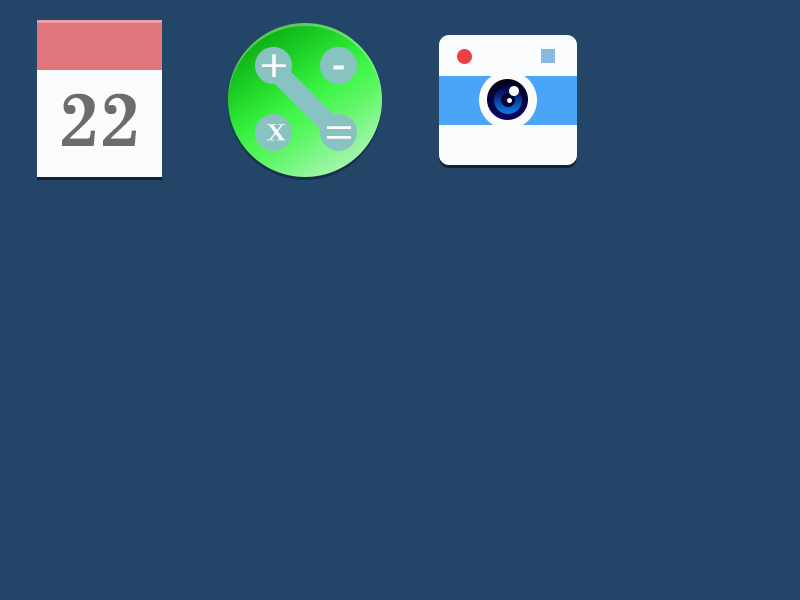
<style>
.page{position:relative;width:800px;height:600px;background:#234567}
.page>*{position:absolute;margin:0}
.t1{font:42.5px "BodoniMT";color:#fbfcfd;text-transform:uppercase;font-weight:bold}
.t2{font:79.6px "BodoniMT";color:#6b6c6e;text-transform:uppercase;font-weight:bold}
.t3{font:24px "BodoniMT";color:#fbfcfd;text-transform:uppercase;font-weight:bold}
</style>
<div class="page">
<p class="t1" style="left:262px;top:54px;width:24px;height:23px">+</p>
<p class="t1" style="left:333px;top:65px;width:11px;height:5px">-</p>
<p class="t2" style="left:62px;top:93px;width:74px;height:53px">22</p>
<p class="t3" style="left:267px;top:124px;width:19px;height:17px">x</p>
<p class="t1" style="left:327px;top:126px;width:24px;height:13px">=</p>
</div>
